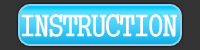
<style>
.page{position:relative;width:200px;height:50px;background:#333333}
.page>*{position:absolute;margin:0}
.t1{font:30px "GungsuhChe";letter-spacing:-0.025em;color:#ffffff}
</style>
<div class="page">
<p class="t1" style="left:21px;top:14px;width:156px;height:23px">INSTRUCTION</p>
</div>
